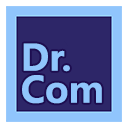
<style>
.page{position:relative;width:128px;height:128px;background:#2d2668}
.page>*{position:absolute;margin:0}
.t1{font:36px/32px "MicrosoftYaHei-Bold";color:#90c5fc}
</style>
<div class="page">
<p class="t1" style="left:22px;top:43px;width:80px;height:61px">Dr.<br>Com</p>
</div>
